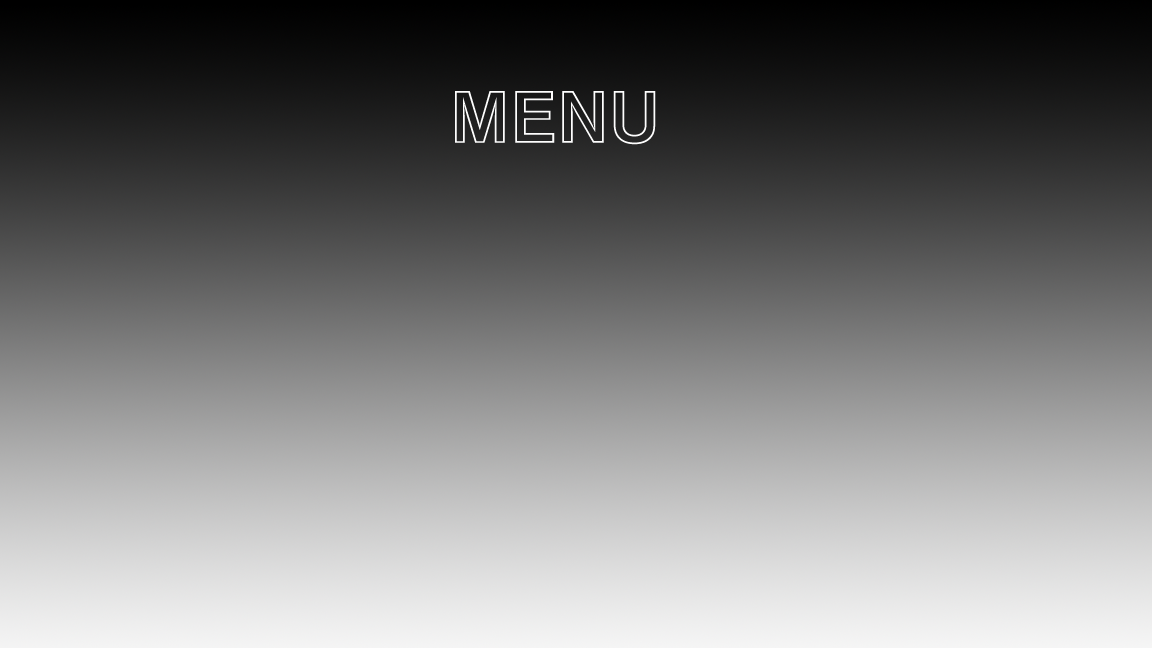
<style>
.page{position:relative;width:1152px;height:648px}
.page>*{position:absolute;margin:0}
.t1{font:72px "Swiss721BT-BoldOutline";color:#fefefe}
</style>
<div class="page">
<p class="t1" style="left:455px;top:91px;width:201px;height:54px">MENU</p>
</div>
